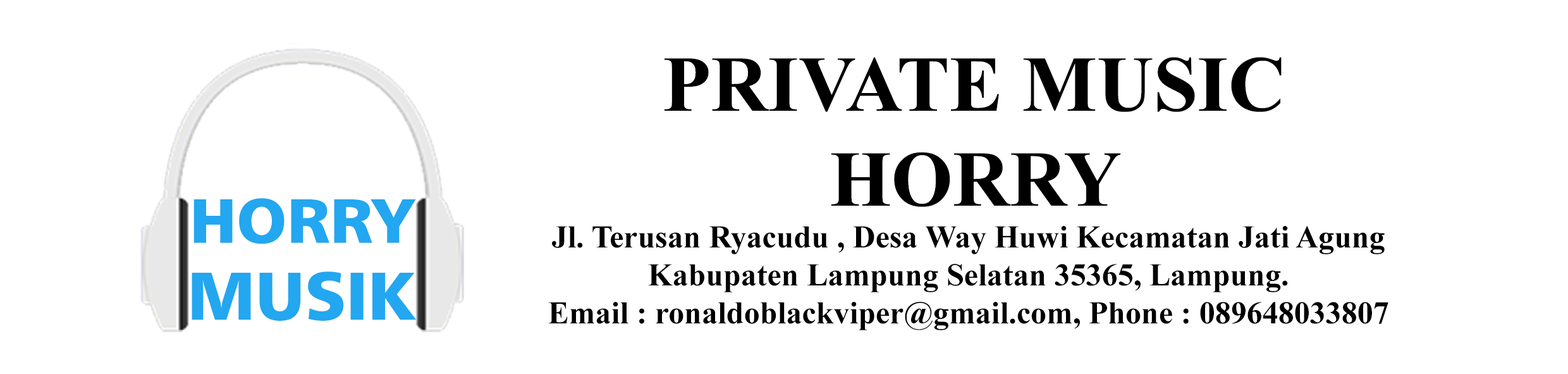
<style>
.page{position:relative;width:1568px;height:374px;background:#ffffff}
.page>*{position:absolute;margin:0}
.t1{font:79px "TimesNewRomanPS-BoldMT";color:#000000}
.t2{font:62.4px "Humanist777BT-BlackB";color:#22a7f0;scale:1.04 1}
.t3{font:31.6px "TimesNewRomanPS-BoldMT";color:#000000}
.t4{font:67.4px "Humanist777BT-BlackB";color:#22a7f0}
</style>
<div class="page">
<p class="t1" style="left:665px;top:57px;width:617px;height:150px;text-align:center">PRIVATE MUSIC<br>HORRY</p>
<p class="t2" style="left:193px;top:198px;width:223px;height:46px">HORRY</p>
<p class="t3" style="left:548px;top:226px;width:840px;height:104px;text-align:center">Jl. Terusan Ryacudu , Desa Way Huwi Kecamatan Jati Agung<br>Kabupaten Lampung Selatan 35365, Lampung.<br>Email : ronaldoblackviper@gmail.com, Phone : 089648033807</p>
<p class="t4" style="left:192px;top:271px;width:224px;height:50px">MUSIK</p>
</div>
